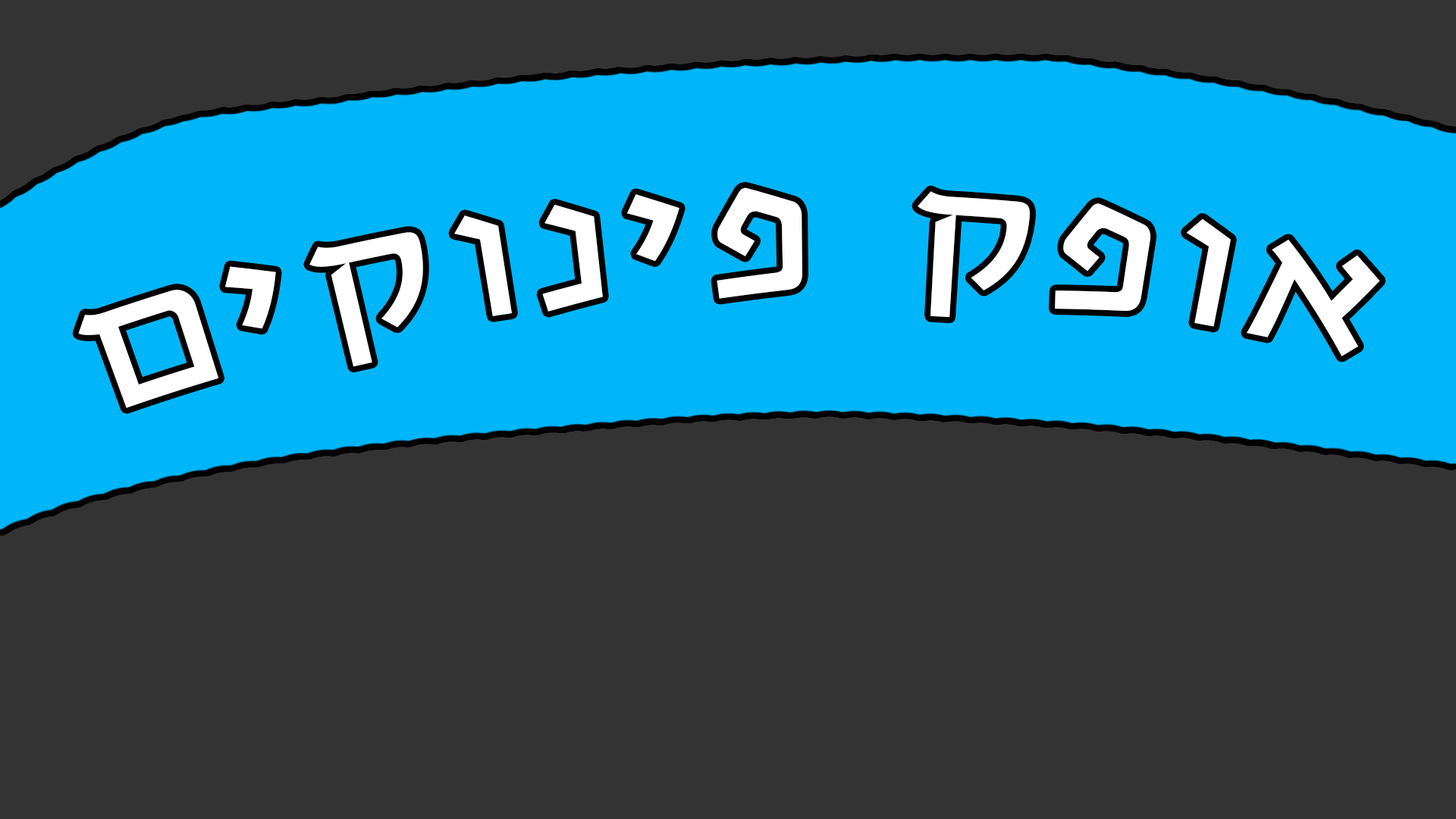
<style>
.page{position:relative;width:1456px;height:819px;background:#333333}
.page>*{position:absolute;margin:0}
.t1{font:168.9px "GuttmanHatzvi";letter-spacing:0.08em;color:#ffffff}
</style>
<div class="page">
<p class="t1" style="left:78px;top:187px;width:1302px;height:221px;rotate:-2deg">םיקוניפ קפוא</p>
</div>
